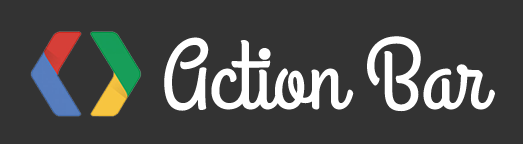
<style>
.page{position:relative;width:523px;height:144px;background:#333333}
.page>*{position:absolute;margin:0}
.t1{font:97.5px "GrandHotel-Regular";color:#ffffff}
</style>
<div class="page">
<p class="t1" style="left:164px;top:36px;width:331px;height:76px">Action Bar</p>
</div>
